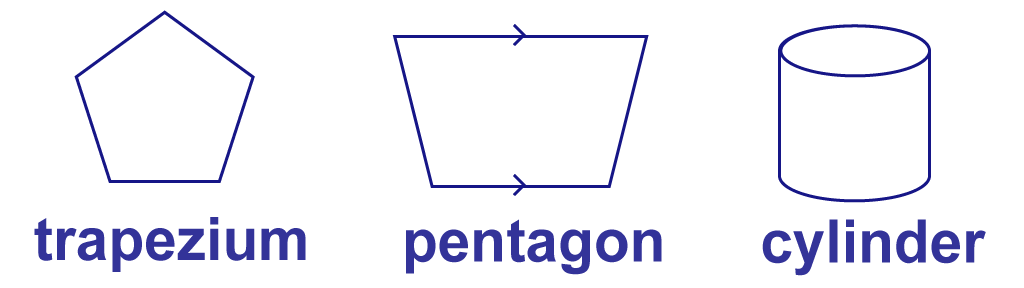
<style>
.page{position:relative;width:1024px;height:288px;background:#ffffff}
.page>*{position:absolute;margin:0}
.t1{font:60px "Arial-BoldMT";color:#333399}
</style>
<div class="page">
<p class="t1" style="left:34px;top:217px;width:272px;height:55px">trapezium</p>
<p class="t1" style="left:406px;top:219px;width:256px;height:56px">pentagon</p>
<p class="t1" style="left:762px;top:219px;width:224px;height:57px">cylinder</p>
</div>
